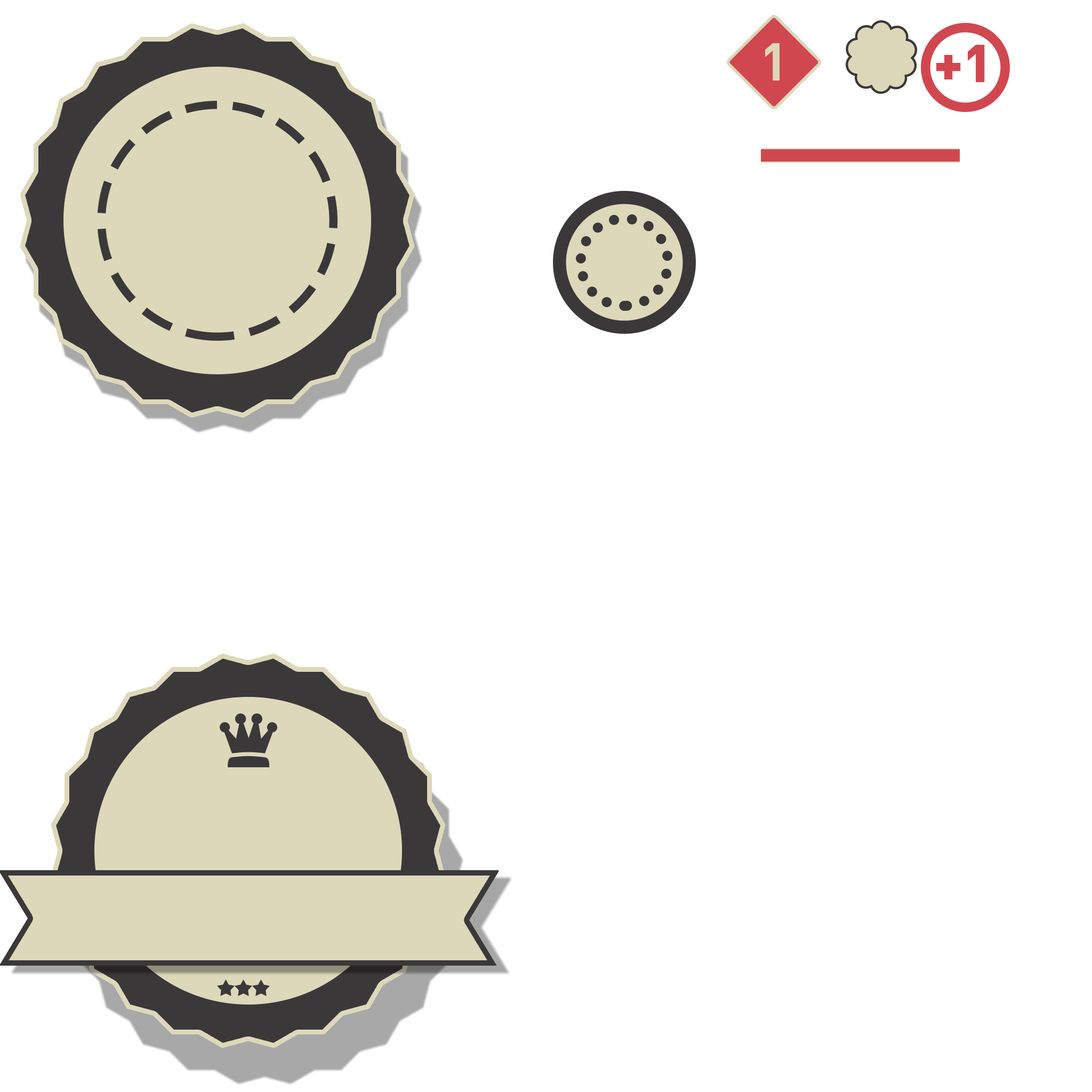
<style>
.page{position:relative;width:1092px;height:1092px;background:#ffffff}
.page>*{position:absolute;margin:0}
.t1{font:52.6px "DINPro-Bold";color:#ddd7b9}
.t2{font:52.8px "DINPro-Black";color:#d14750}
</style>
<div class="page">
<p class="t1" style="left:765px;top:43px;width:15px;height:38px">1</p>
<p class="t2" style="left:936px;top:45px;width:49px;height:37px">+1</p>
</div>
